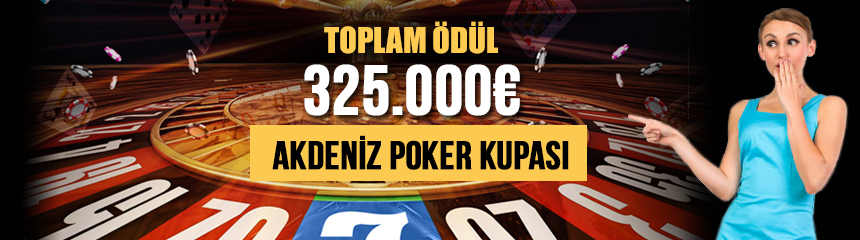
<style>
.page{position:relative;width:860px;height:240px}
.page>*{position:absolute;margin:0}
.t1{font:33px "Impact";letter-spacing:-0.005em;color:#fecb52}
.t2{font:70px "BebasNeue";letter-spacing:-0.005em;color:#ffffff;font-weight:bold}
.t3{font:40px "BebasNeue";letter-spacing:-0.005em;color:#000000;font-weight:bold}
</style>
<div class="page">
<p class="t1" style="left:324px;top:21px;width:174px;height:33px">TOPLAM ÖDÜL</p>
<p class="t2" style="left:304px;top:64px;width:216px;height:52px">325.000€</p>
<p class="t3" style="left:272px;top:135px;width:297px;height:35px">akdenİZ POKER KUPASI</p>
</div>
